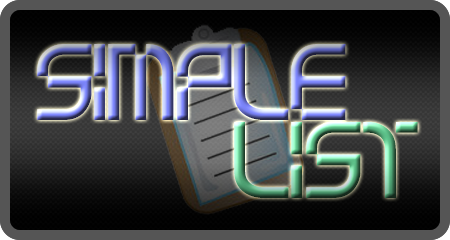
<style>
.page{position:relative;width:450px;height:240px}
.page>*{position:absolute;margin:0}
.t1{font:95px "Musictelevisionselector"}
</style>
<div class="page">
<p class="t1" style="left:37px;top:44px;width:309px;height:76px">Simple</p>
<p class="t1" style="left:234px;top:122px;width:184px;height:76px">List</p>
</div>
